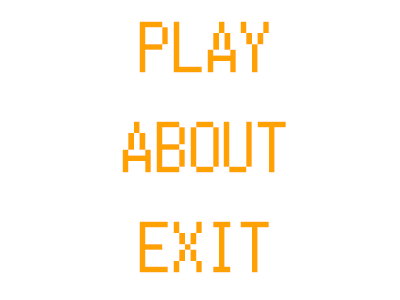
<style>
.page{position:relative;width:400px;height:300px;background:#ffffff}
.page>*{position:absolute;margin:0}
.t1{font:72px "Terminal";color:#ffa200}
</style>
<div class="page">
<p class="t1" style="left:139px;top:21px;width:130px;height:52px">PLAY</p>
<p class="t1" style="left:122px;top:121px;width:164px;height:52px">ABOUT</p>
<p class="t1" style="left:139px;top:221px;width:130px;height:52px">EXIT</p>
</div>
